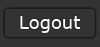
<style>
.page{position:relative;width:100px;height:47px;background:#333333}
.page>*{position:absolute;margin:0}
.t1{font:18px "Verdana";color:#ffffff}
</style>
<div class="page">
<p class="t1" style="left:20px;top:16px;width:61px;height:17px">Logout</p>
</div>
